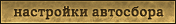
<style>
.page{position:relative;width:176px;height:24px}
.page>*{position:absolute;margin:0}
.t1{font:12.9px "CooperMediumCBT";letter-spacing:0.04em;color:#322512;font-weight:bold}
</style>
<div class="page">
<p class="t1" style="left:14px;top:6px;width:150px;height:14px">настройки автосбора</p>
</div>
